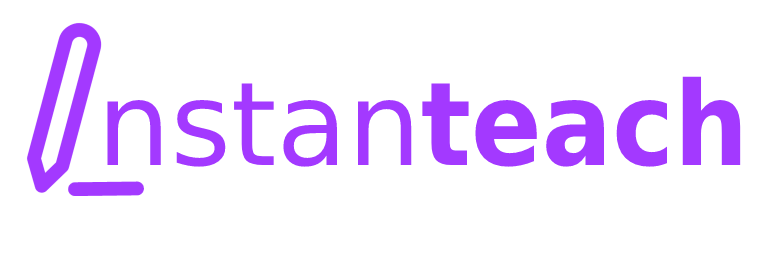
<style>
.page{position:relative;width:774px;height:267px;background:#ffffff}
.page>*{position:absolute;margin:0}
.t1{font:116px "DejaVuSans";color:#a339ff}
.t2{font:116px "DejaVuSansCondensed-Bold";color:#a339ff}
</style>
<div class="page">
<p class="t1" style="left:107px;top:76px;width:634px;height:91px">nstan<span class="t2">teach</span></p>
</div>
